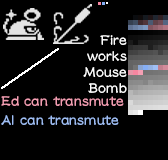
<style>
.page{position:relative;width:168px;height:160px;background:#000000}
.page>*{position:absolute;margin:0}
.t1{font:18px/16px "DFLeiShoStd-W5";color:#ffffff;scale:0.9 1}
.t2{font:18px/16px "DFLeiShoStd-W5";letter-spacing:-0.075em;color:#ffffff;scale:0.9 1}
.t3{font:18px/19px "DFLeiShoStd-W5";letter-spacing:-0.01em;color:#f49fb3;scale:0.9 1}
.t4{font:18px/19px "DFLeiShoStd-W5";letter-spacing:-0.05em;color:#a0bff5;scale:0.9 1}
.t5{font:18px/19px "DFLeiShoStd-W5";letter-spacing:-0.01em;color:#a0bff5;scale:0.9 1}
</style>
<div class="page">
<p class="t1" style="left:83px;top:35px;width:44px;height:58px;text-align:right"><span class="t2">F</span>ire<br>works<br>Mouse<br>Bomb</p>
<p class="t3" style="left:1px;top:96px;width:123px;height:29px">Ed can transmute<br><span class="t4">A</span><span class="t5">l can transmute</span></p>
</div>
